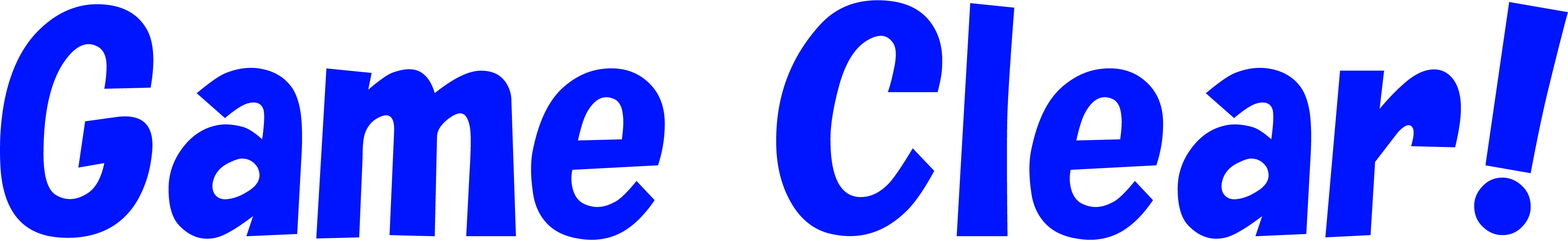
<style>
.page{position:relative;width:1568px;height:240px;background:#ffffff}
.page>*{position:absolute;margin:0}
.t1{font:288.6px "HGSSoeiKakupoptai";color:#0015ff}
</style>
<div class="page">
<p class="t1" style="left:0px;top:0px;width:1568px;height:240px">Game Clear!</p>
</div>
